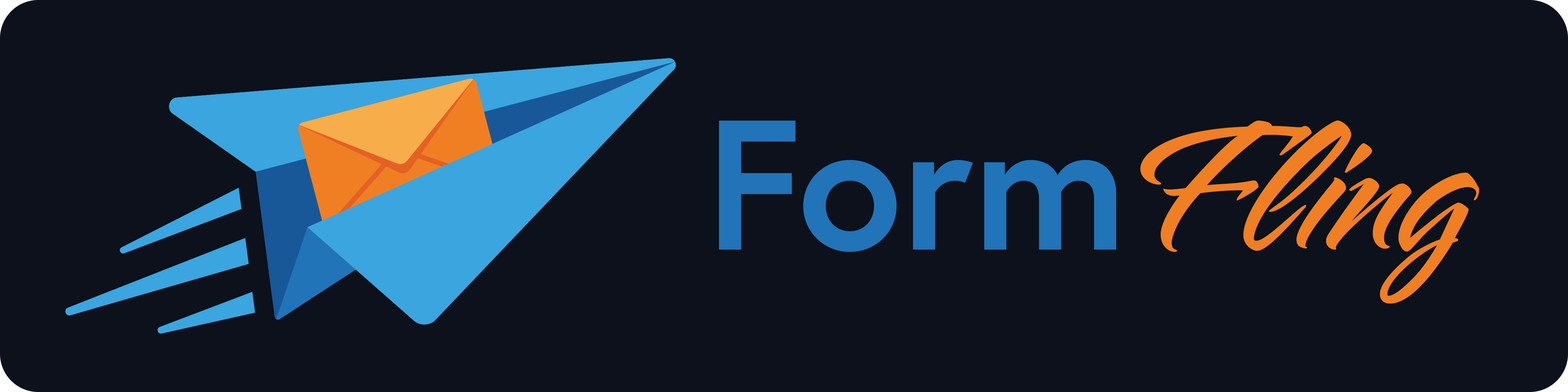
<style>
.page{position:relative;width:1568px;height:392px;background:#0c111b}
.page>*{position:absolute;margin:0}
.t1{font:222.3px "AlpineScript-Regular";color:#f07f23}
.t2{font:184.3px "Europa-Bold";color:#2174b8}
</style>
<div class="page">
<p class="t1" style="left:719px;top:120px;width:760px;height:184px"><span class="t2">Form</span>Fling</p>
</div>
